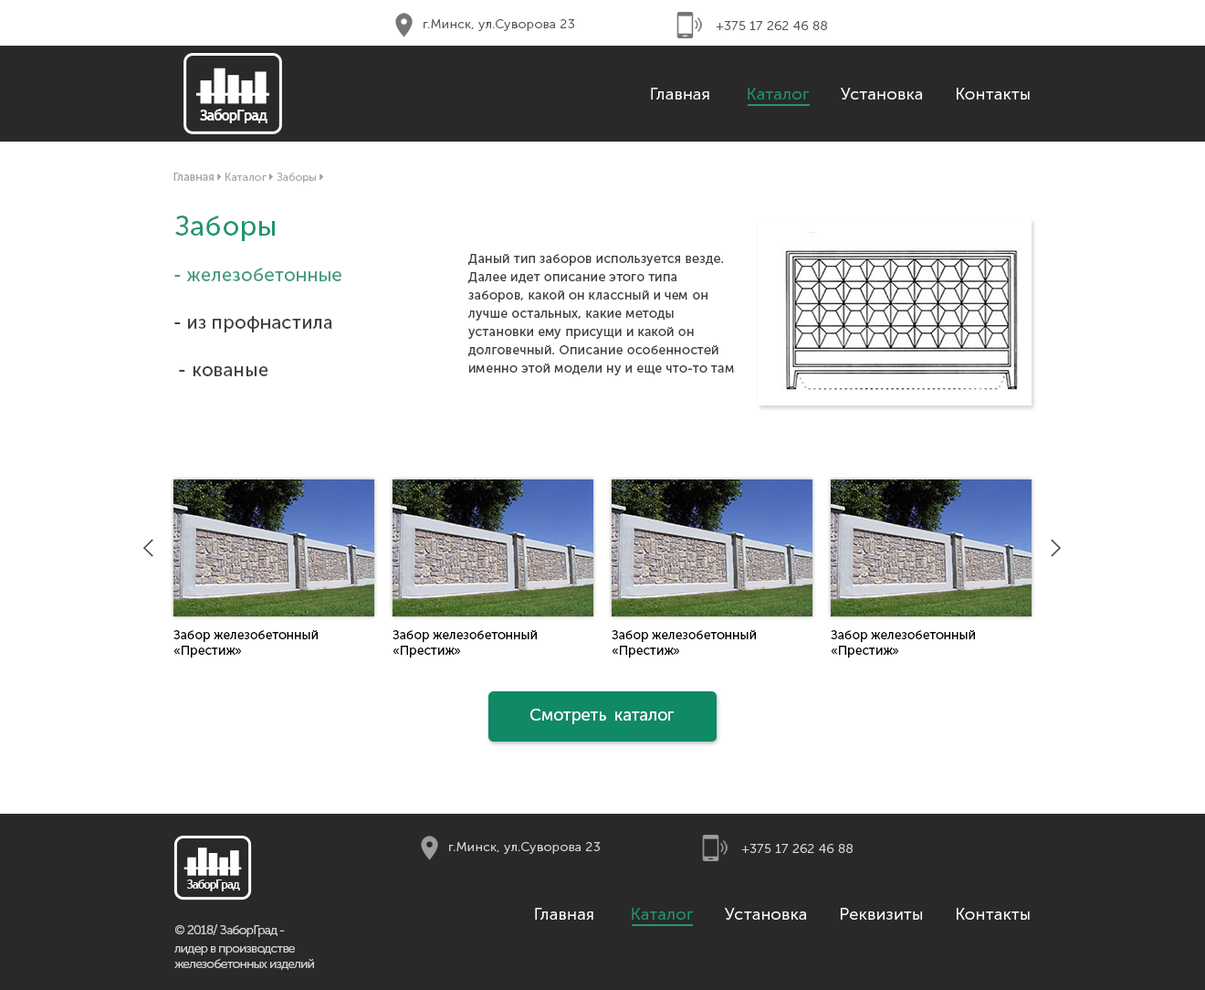
<style>
.page{position:relative;width:1205px;height:990px;background:#ffffff}
.page>*{position:absolute;margin:0}
.t1{font:12.8px "MuseoSansCyrl-300";letter-spacing:0.025em;color:#585858}
.t2{font:16.4px "MuseoSansCyrl-300";letter-spacing:0.025em;color:#ffffff}
.t3{font:16.4px "MuseoSansCyrl-300";letter-spacing:0.025em;color:#fefefe}
.t4{font:16.4px "MuseoSansCyrl-300";letter-spacing:0.025em;color:#209573}
.t5{font:15.1px "TrebuchetMS-Bold";letter-spacing:-0.075em;color:#ffffff}
.t6{font:27.4px "MuseoSansCyrl-500";letter-spacing:0.025em;color:#209573}
.t7{font:12.8px/18.3px "MuseoSansCyrl-500";letter-spacing:0.025em;color:#404040}
.t8{font:18.3px/23.7px "MuseoSansCyrl-500";letter-spacing:0.025em}
.t9{font:12.8px "MuseoSansCyrl-500";color:#000000}
.t10{font:16.4px "MuseoSansCyrl-500";color:#ffffff}
.t11{font:12.8px "MuseoSansCyrl-300";letter-spacing:0.025em;color:#d4d4d4}
.t12{font:11.9px "TrebuchetMS-Bold";letter-spacing:-0.075em;color:#ffffff}
.t13{font:12.8px "MuseoSansCyrl-300";letter-spacing:-0.05em;color:#cfcfcf}
.t14{font:12.8px/18.3px "MuseoSansCyrl-300";letter-spacing:-0.05em;color:#cfcfcf}
</style>
<div class="page">
<p class="t1" style="left:424px;top:19px;width:150px;height:12px">г.Минск, ул.Суворова 23</p>
<p class="t1" style="left:716px;top:21px;width:111px;height:9px">+375 17 262 46 88</p>
<p class="t2" style="left:651px;top:88px;width:379px;height:12px"><span class="t3">Главная        </span><span class="t4">Каталог </span>      Установка       Контакты</p>
<p class="t5" style="left:200px;top:109px;width:67px;height:14px">ЗаборГрад</p>
<p class="t6" style="left:175px;top:215px;width:100px;height:26px">Заборы</p>
<p class="t7" style="left:468px;top:254px;width:266px;height:121px">Даный тип заборов используется везде. Далее идет описание этого типа заборов, какой он классный и чем он лучше остальных, какие методы установки ему присущи и какой он долговечный. Описание особенностей именно этой модели ну и еще что-то там</p>
<p class="t8" style="left:174px;top:267px;width:167px;height:109px">- железобетонные<br><br>- из профнастила<br><br> - кованые</p>
<p class="t9" style="left:173px;top:630px;width:145px;height:27px">Забор железобетонный<br>«Престиж»</p>
<p class="t9" style="left:393px;top:630px;width:144px;height:27px">Забор железобетонный<br>«Престиж»</p>
<p class="t9" style="left:612px;top:630px;width:144px;height:27px">Забор железобетонный<br>«Престиж»</p>
<p class="t9" style="left:831px;top:630px;width:144px;height:27px">Забор железобетонный<br>«Престиж»</p>
<p class="t10" style="left:530px;top:708px;width:144px;height:16px">Смотреть  каталог</p>
<p class="t11" style="left:449px;top:842px;width:151px;height:12px">г.Минск, ул.Суворова 23</p>
<p class="t11" style="left:741px;top:844px;width:112px;height:9px">+375 17 262 46 88</p>
<p class="t12" style="left:186px;top:879px;width:54px;height:12px">ЗаборГрад</p>
<p class="t2" style="left:535px;top:907px;width:495px;height:12px">Главная        <span class="t4">Каталог</span>       Установка       Реквизиты       Контакты</p>
<p class="t13" style="left:174px;top:924px;width:140px;height:45px">© 2018/ ЗаборГрад - <br><span class="t14">лидер в производстве <br></span>железобетонных изделий</p>
</div>
